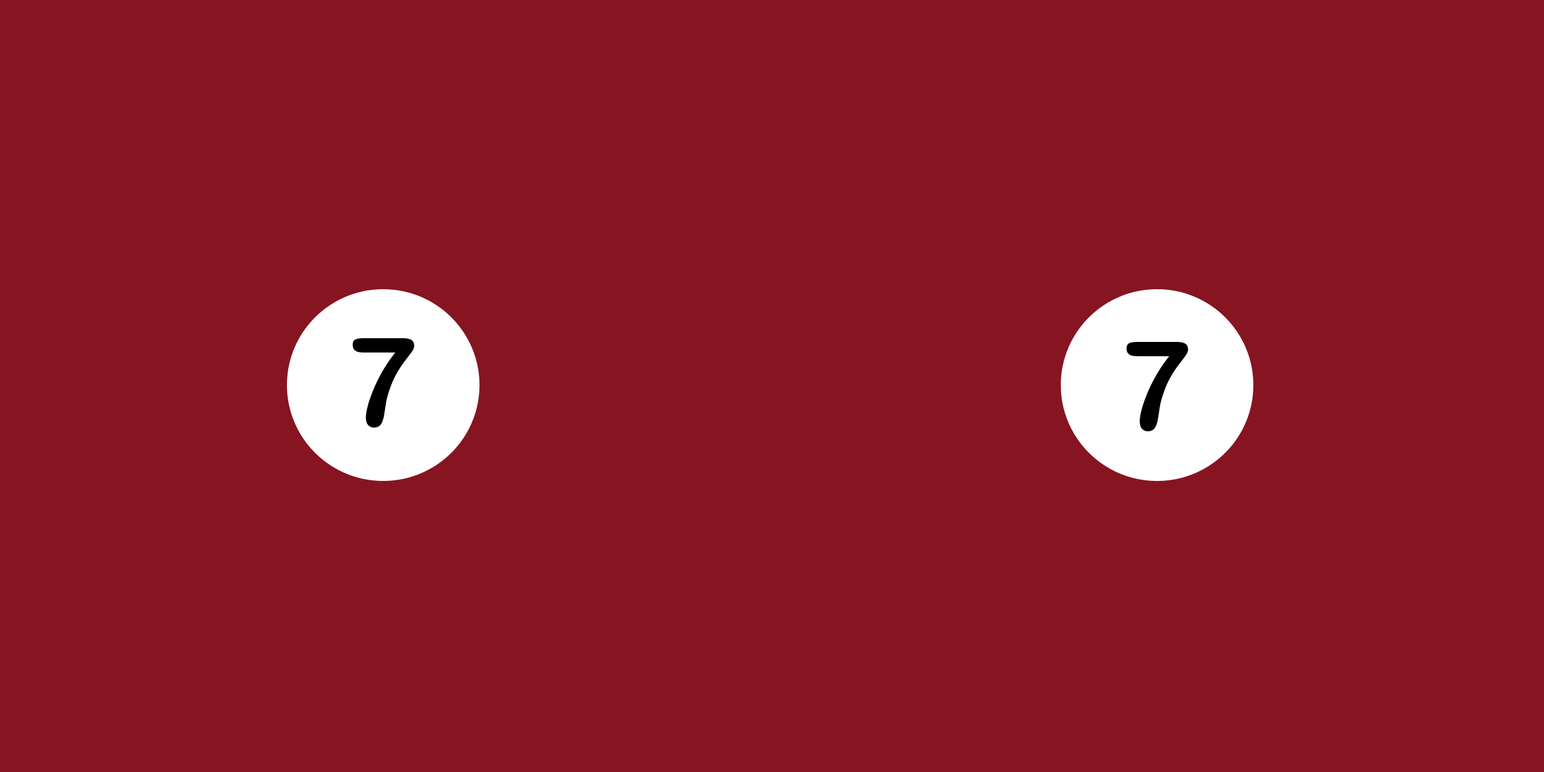
<style>
.page{position:relative;width:1544px;height:772px;background:#871421}
.page>*{position:absolute;margin:0}
.t1{font:124.2px "ArialRoundedMTBold";letter-spacing:-0.025em;color:#000000}
</style>
<div class="page">
<p class="t1" style="left:352px;top:338px;width:62px;height:90px">7</p>
<p class="t1" style="left:1126px;top:342px;width:62px;height:90px">7</p>
</div>
